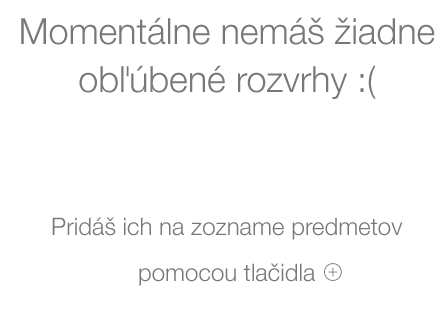
<style>
.page{position:relative;width:446px;height:310px;background:#ffffff}
.page>*{position:absolute;margin:0}
.t1{font:36px/48px "HelveticaNeue-Light";color:#787878}
.t2{font:24px/46px "HelveticaNeue-Light";color:#787878}
</style>
<div class="page">
<p class="t1" style="left:21px;top:17px;width:414px;height:82px;text-align:center">Momentálne nemáš žiadne<br>obľúbené rozvrhy :(</p>
<p class="t2" style="left:52px;top:217px;width:351px;height:69px;text-align:center">Pridáš ich na zozname predmetov <br>pomocou tlačidla</p>
</div>
